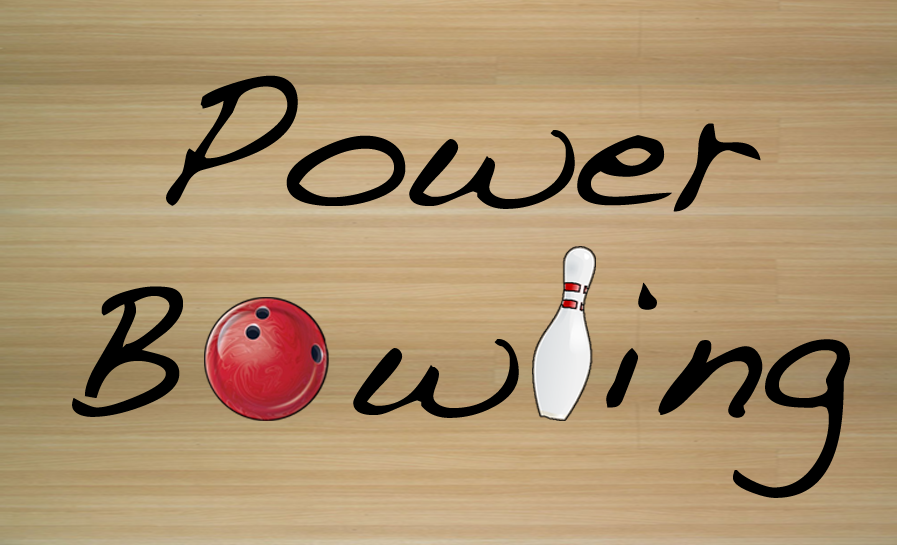
<style>
.page{position:relative;width:897px;height:545px}
.page>*{position:absolute;margin:0}
.t1{font:200px "Handwriting-Dakota";color:#000000}
</style>
<div class="page">
<p class="t1" style="left:166px;top:75px;width:595px;height:137px">Power</p>
<p class="t1" style="left:72px;top:282px;width:778px;height:216px">B  w ing</p>
</div>
